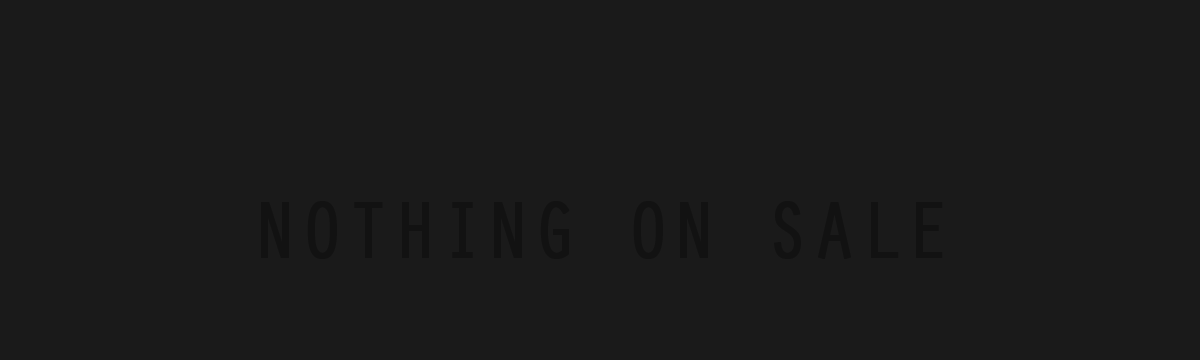
<style>
.page{position:relative;width:1200px;height:360px;background:#1a1a1a}
.page>*{position:absolute;margin:0}
.t1{font:81.8px "OratorStd";color:#121212;font-weight:bold;scale:0.91 1}
</style>
<div class="page">
<p class="t1" style="left:261px;top:201px;width:682px;height:58px">NOTHING ON SALE</p>
</div>
